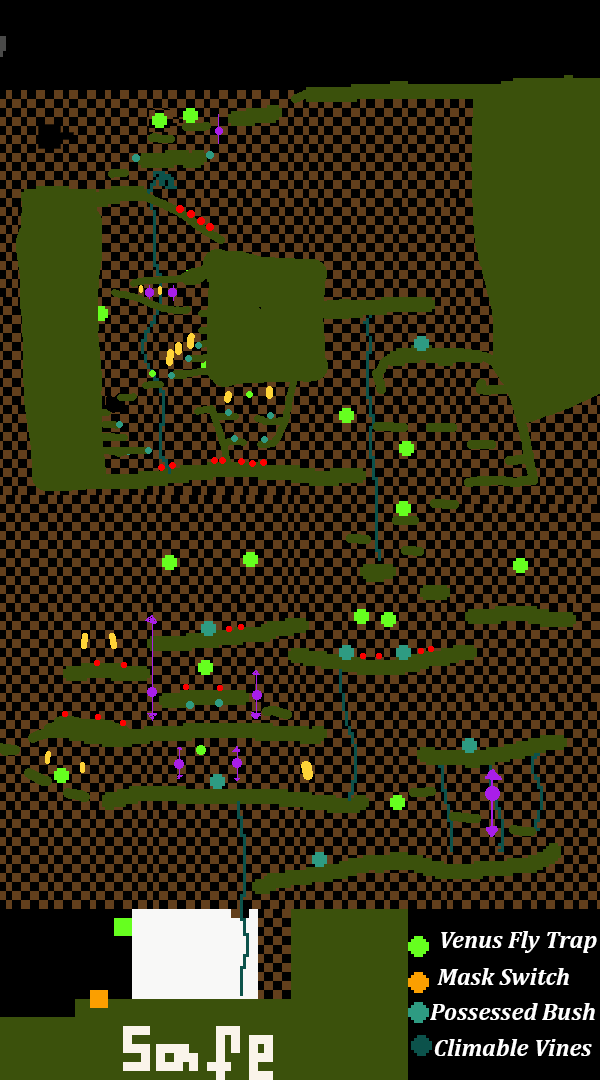
<style>
.page{position:relative;width:600px;height:1080px;background:#000000}
.page>*{position:absolute;margin:0}
.t1{font:24px "Cambria-BoldItalic";color:#ffffff}
</style>
<div class="page">
<p class="t1" style="left:441px;top:931px;width:156px;height:22px">Venus Fly Trap</p>
<p class="t1" style="left:437px;top:968px;width:132px;height:17px">Mask Switch</p>
<p class="t1" style="left:430px;top:1003px;width:165px;height:17px">Possessed Bush</p>
<p class="t1" style="left:434px;top:1039px;width:158px;height:17px">Climable Vines</p>
</div>
